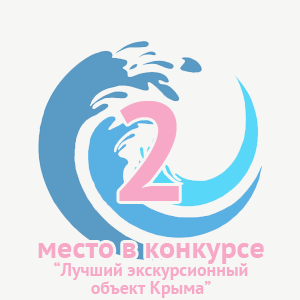
<style>
.page{position:relative;width:300px;height:300px;background:#f6f6f4}
.page>*{position:absolute;margin:0}
.t1{font:140px "PTSans-Bold";color:#f6a8c6}
.t2{font:18px/18px "PTSans-Bold";color:#f6a8c6}
.t3{font:30px/18px "PTSans-Bold";color:#f6a8c6}
</style>
<div class="page">
<p class="t1" style="left:119px;top:101px;width:60px;height:100px">2</p>
<p class="t2" style="left:38px;top:243px;width:226px;height:55px;text-align:center"><span class="t3">место в конкурсе<br></span>“Лучший экскурсионный<br>объект Крыма”</p>
</div>
